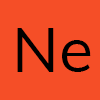
<style>
.page{position:relative;width:100px;height:100px;background:#f54e27}
.page>*{position:absolute;margin:0}
.t1{font:62.5px "Muli-Regular";color:#000000}
</style>
<div class="page">
<p class="t1" style="left:17px;top:28px;width:74px;height:44px">Ne</p>
</div>
